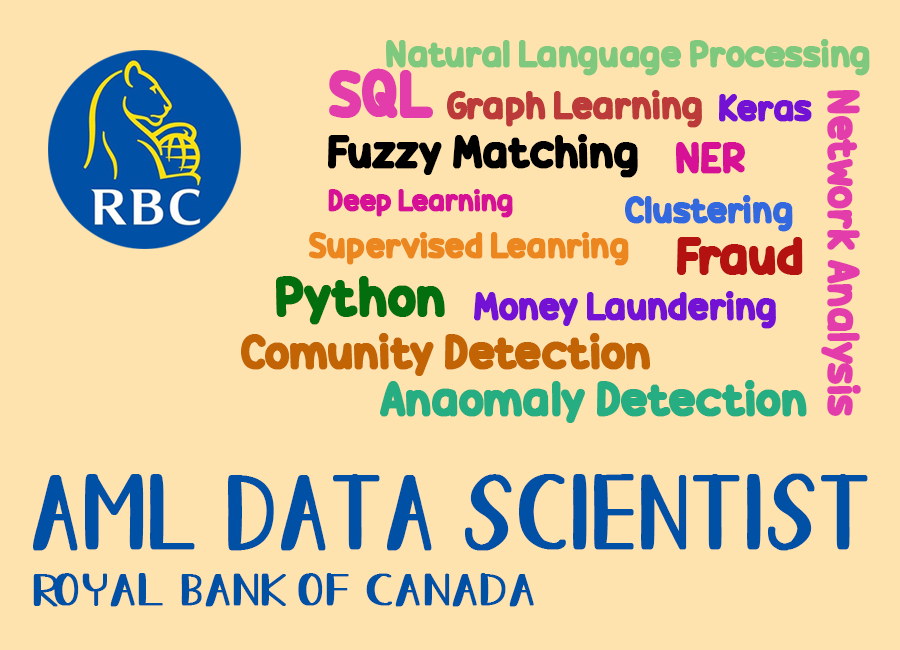
<style>
.page{position:relative;width:900px;height:650px;background:#ffe3ae}
.page>*{position:absolute;margin:0}
.t1{font:37.9px "CandyBeans";letter-spacing:-0.025em;color:#7fc97f;font-weight:bold;scale:0.95 1}
.t2{font:66.4px "CandyBeans";letter-spacing:-0.025em;color:#e33dac;font-weight:bold;scale:0.95 1}
.t3{font:38.7px "CandyBeans";letter-spacing:-0.025em;color:#bc3a3a;font-weight:bold;scale:0.95 1}
.t4{font:38.1px "CandyBeans";letter-spacing:-0.025em;color:#7311d5;font-weight:bold;scale:0.95 1}
.t5{font:44.9px "CandyBeans";letter-spacing:-0.025em;color:#e33dac;font-weight:bold;scale:0.95 1}
.t6{font:46.3px "CandyBeans";letter-spacing:-0.025em;color:#000000;font-weight:bold;scale:0.95 1}
.t7{font:44.4px "CandyBeans";letter-spacing:-0.025em;color:#d61195;font-weight:bold;scale:0.95 1}
.t8{font:30px "CandyBeans";letter-spacing:-0.025em;color:#d61195;font-weight:bold;scale:0.95 1}
.t9{font:37.5px "CandyBeans";letter-spacing:-0.025em;color:#3269de;font-weight:bold;scale:0.95 1}
.t10{font:36.1px "CandyBeans";letter-spacing:-0.025em;color:#ec861f;font-weight:bold;scale:0.95 1}
.t11{font:52.1px "CandyBeans";letter-spacing:-0.025em;color:#b41111;font-weight:bold;scale:0.95 1}
.t12{font:55.6px "CandyBeans";letter-spacing:-0.025em;color:#036e0d;font-weight:bold;scale:0.95 1}
.t13{font:38.6px "CandyBeans";letter-spacing:-0.025em;color:#7311d5;font-weight:bold;scale:0.95 1}
.t14{font:48px "CandyBeans";letter-spacing:-0.025em;color:#c26304;font-weight:bold;scale:0.95 1}
.t15{font:49.2px "CandyBeans";letter-spacing:-0.025em;color:#26ad81;font-weight:bold;scale:0.95 1}
.t16{font:104.8px "AllureOfTheSunRegular";letter-spacing:-0.025em;color:#0050a5;font-weight:bold;scale:0.95 1}
.t17{font:45px "AllureOfTheSunRegular";letter-spacing:-0.025em;color:#0050a5;font-weight:bold;scale:1.2 1}
</style>
<div class="page">
<p class="t1" style="left:386px;top:39px;width:484px;height:37px">Natural Language Processing</p>
<p class="t2" style="left:329px;top:68px;width:104px;height:50px">SQL</p>
<p class="t3" style="left:447px;top:90px;width:255px;height:38px">Graph Learning</p>
<p class="t4" style="left:719px;top:94px;width:93px;height:28px">Keras</p>
<p class="t5" style="left:821px;top:90px;width:40px;height:326px;rotate:90deg">Network Analysis</p>
<p class="t6" style="left:328px;top:134px;width:310px;height:44px">Fuzzy Matching</p>
<p class="t7" style="left:676px;top:142px;width:69px;height:32px">NER</p>
<p class="t8" style="left:328px;top:189px;width:185px;height:29px">Deep Learning</p>
<p class="t9" style="left:625px;top:195px;width:168px;height:37px">Clustering</p>
<p class="t10" style="left:309px;top:232px;width:320px;height:34px">Supervised Leanring</p>
<p class="t11" style="left:677px;top:237px;width:126px;height:38px">Fraud</p>
<p class="t12" style="left:276px;top:276px;width:169px;height:49px">Python</p>
<p class="t13" style="left:474px;top:291px;width:302px;height:38px">Money Laundering</p>
<p class="t14" style="left:241px;top:333px;width:409px;height:43px">Comunity Detection</p>
<p class="t15" style="left:380px;top:380px;width:427px;height:43px">Anaomaly Detection</p>
<p class="t16" style="left:33px;top:473px;width:835px;height:78px">AML dATA sCIENTIST</p>
<p class="t17" style="left:33px;top:573px;width:501px;height:34px">rOYAL bANK OF cANADA</p>
</div>
